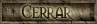
<style>
.page{position:relative;width:97px;height:24px}
.page>*{position:absolute;margin:0}
.t1{font:17.1px "Morpheus"}
</style>
<div class="page">
<p class="t1" style="left:21px;top:5px;width:55px;height:15px">Cerrar</p>
</div>
